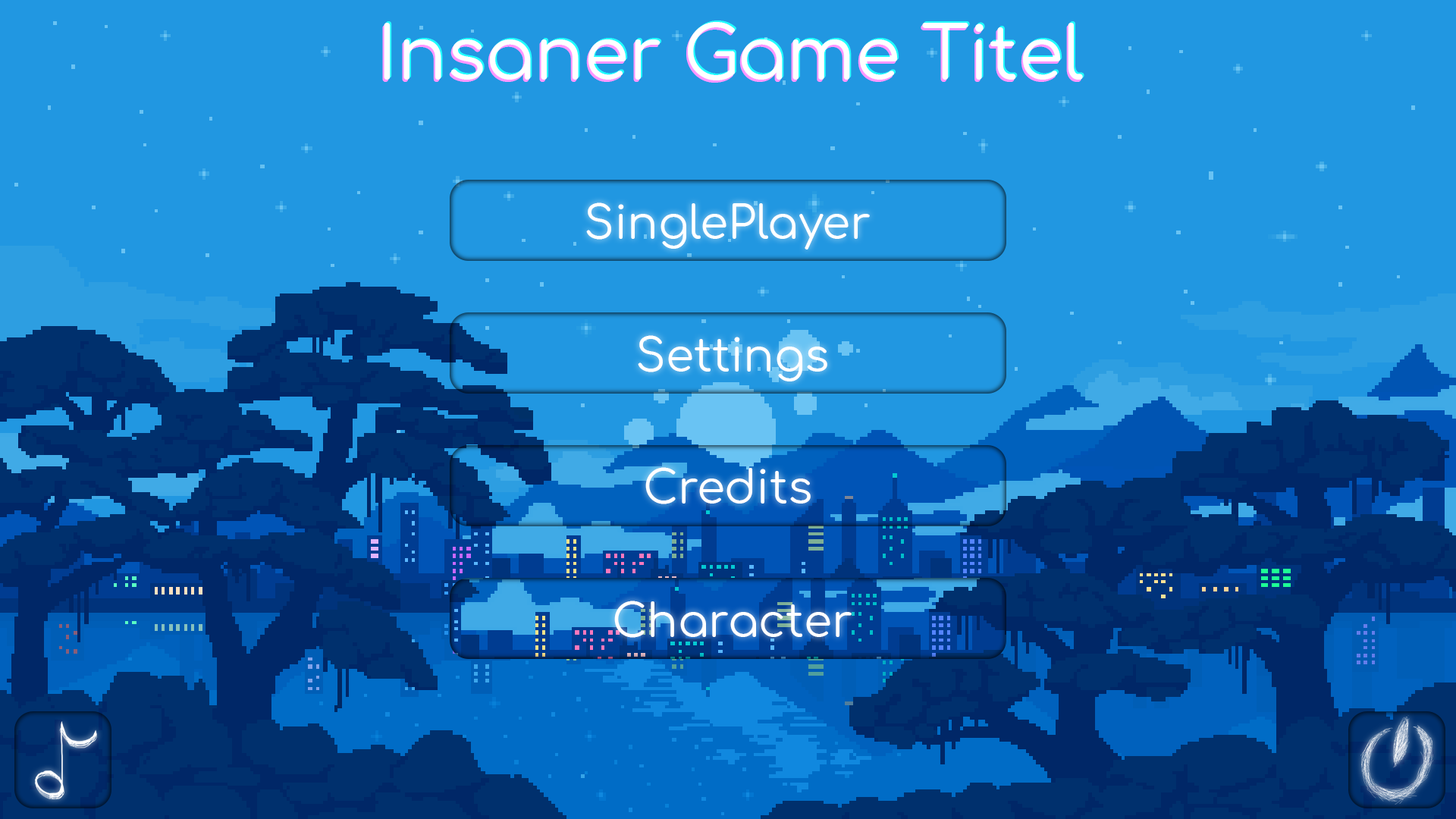
<style>
.page{position:relative;width:1456px;height:819px;background:#2197e1}
.page>*{position:absolute;margin:0}
.t1{font:72.8px "Comfortaa-Regular";color:#ffffff}
.t2{font:45.5px "Comfortaa-Regular";color:#ffffff}
</style>
<div class="page">
<p class="t1" style="left:382px;top:24px;width:699px;height:59px">Insaner Game Titel</p>
<p class="t1" style="left:384px;top:22px;width:699px;height:58px">Insaner Game Titel</p>
<p class="t1" style="left:385px;top:20px;width:699px;height:59px">Insaner Game Titel</p>
<p class="t2" style="left:586px;top:202px;width:284px;height:47px">SinglePlayer</p>
<p class="t2" style="left:638px;top:335px;width:189px;height:46px">Settings</p>
<p class="t2" style="left:645px;top:467px;width:166px;height:37px">Credits</p>
<p class="t2" style="left:614px;top:601px;width:238px;height:37px">Character</p>
</div>
